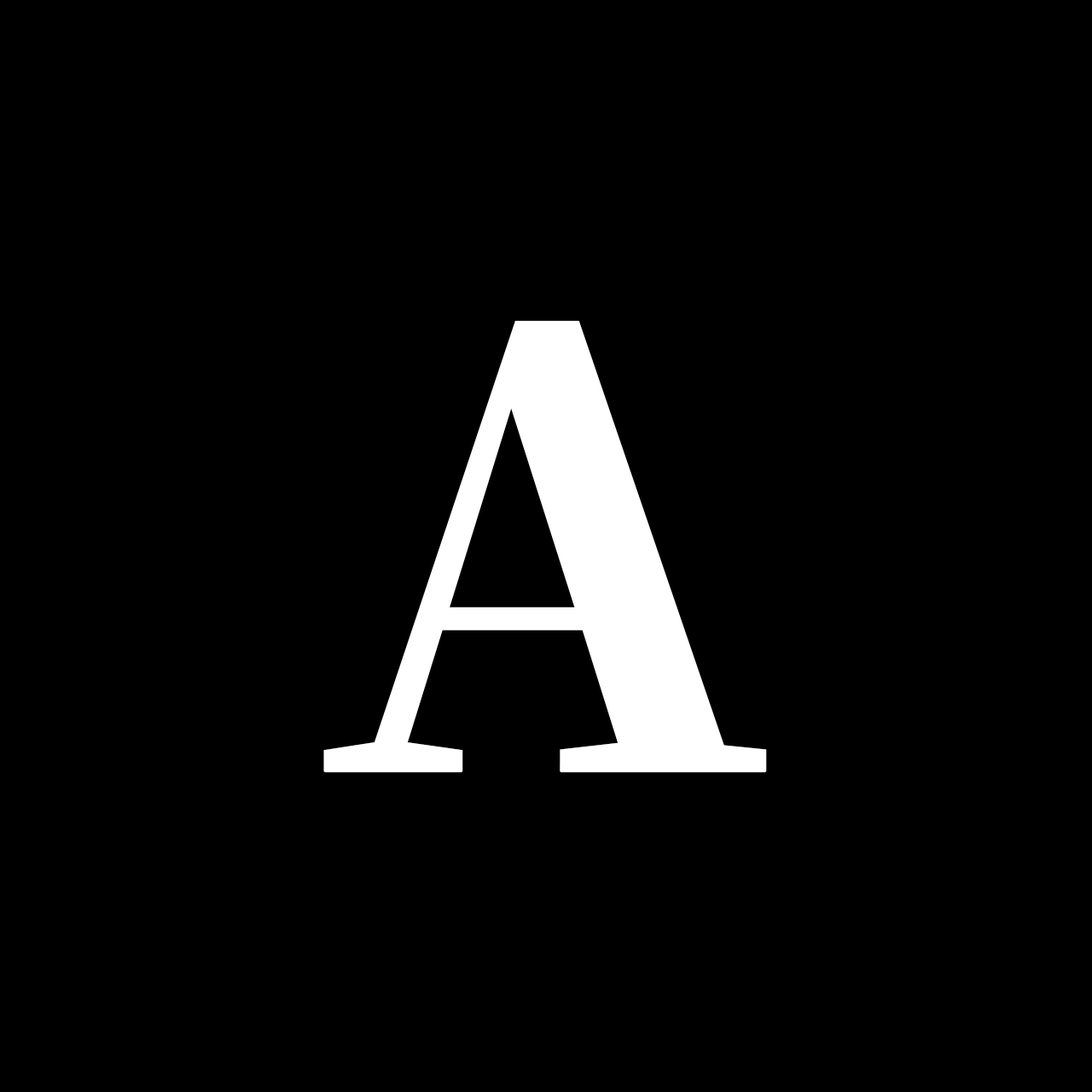
<style>
.page{position:relative;width:1092px;height:1092px;background:#000000}
.page>*{position:absolute;margin:0}
.t1{font:599.2px "SourceHanSerifHC-Heavy";letter-spacing:0.1em;color:#ffffff;font-weight:bold}
</style>
<div class="page">
<p class="t1" style="left:323px;top:321px;width:444px;height:452px">A</p>
</div>
